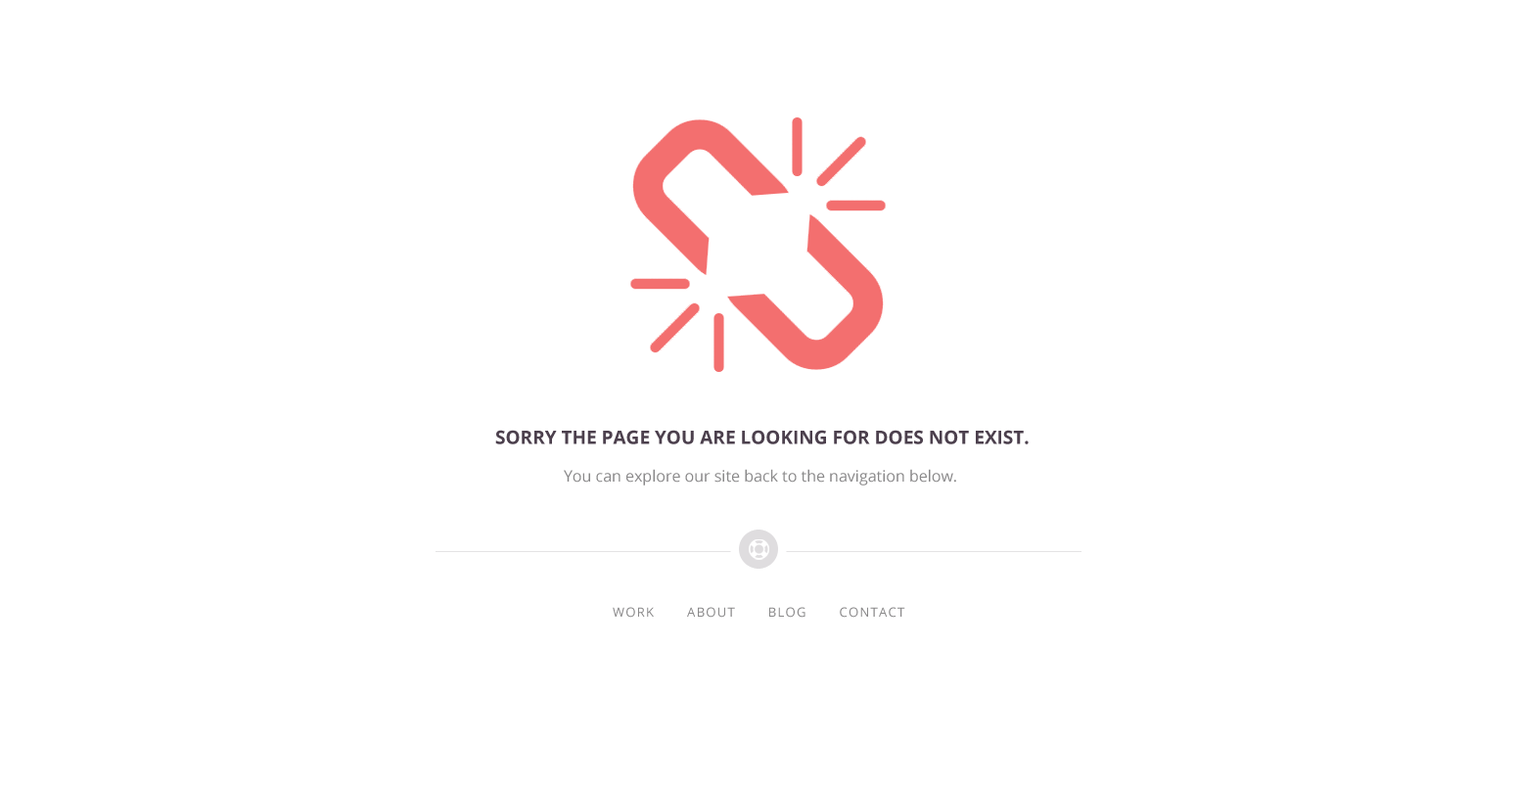
<style>
.page{position:relative;width:1517px;height:786px;background:#ffffff}
.page>*{position:absolute;margin:0}
.t1{font:18.6px "OpenSans-Bold";color:#4c404d;text-transform:uppercase}
.t2{font:15.7px "OpenSans";color:#898889}
.t3{font:12.7px "OpenSans";letter-spacing:0.1em;color:#898889;text-transform:uppercase}
</style>
<div class="page">
<p class="t1" style="left:495px;top:430px;width:534px;height:14px">sorry the page you are looking for does not exist.</p>
<p class="t2" style="left:564px;top:469px;width:392px;height:16px">You can explore our site back to the navigation below.</p>
<p class="t3" style="left:613px;top:607px;width:292px;height:11px">work       about       blog       contact</p>
</div>
